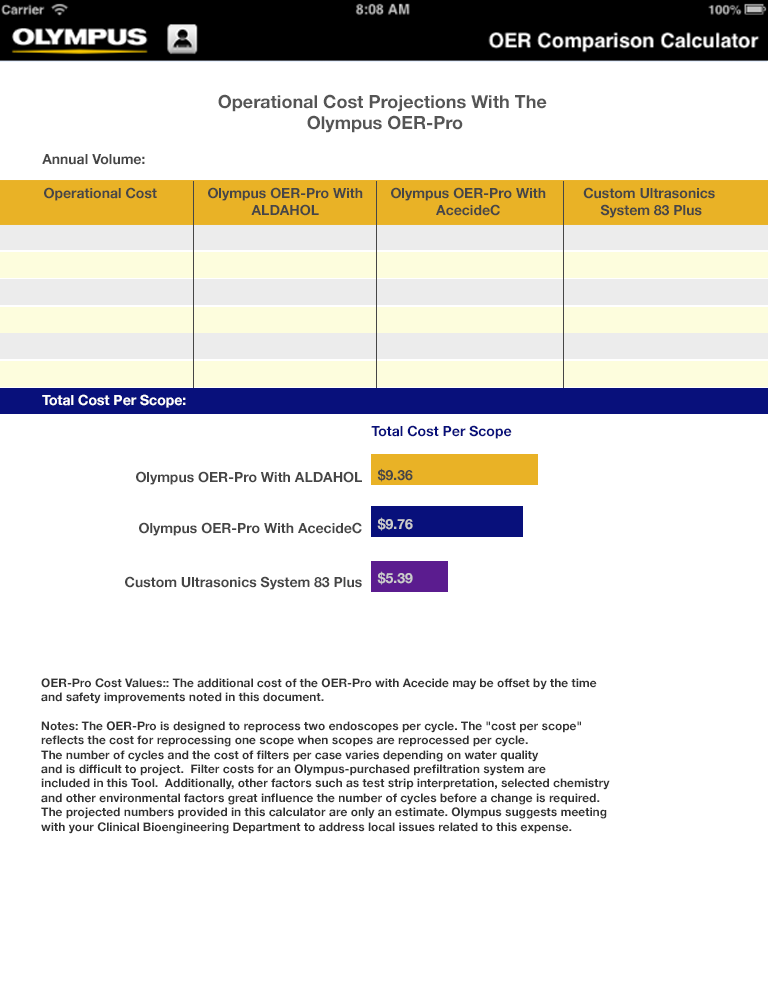
<style>
.page{position:relative;width:768px;height:1004px;background:#ffffff}
.page>*{position:absolute;margin:0}
.t1{font:18px "HelveticaNeue-Bold";color:#555555}
.t2{font:14px "HelveticaNeue-Bold";color:#464646}
.t3{font:14px "HelveticaNeue-Bold";color:#ffffff}
.t4{font:14px "HelveticaNeue-Bold";color:#08107b}
.t5{font:14px "HelveticaNeue-Bold";color:#cccccc}
.t6{font:12px "HelveticaNeue-Bold";color:#333333}
</style>
<div class="page">
<p class="t1" style="left:218px;top:94px;width:329px;height:39px;text-align:center">Operational Cost Projections With The <br>Olympus OER-Pro</p>
<p class="t2" style="left:42px;top:154px;width:103px;height:11px">Annual Volume:</p>
<p class="t2" style="left:44px;top:187px;width:113px;height:14px">Operational Cost</p>
<p class="t2" style="left:208px;top:187px;width:155px;height:29px;text-align:center">Olympus OER-Pro With<br>ALDAHOL</p>
<p class="t2" style="left:391px;top:187px;width:155px;height:29px;text-align:center">Olympus OER-Pro With<br>AcecideC</p>
<p class="t2" style="left:583px;top:187px;width:132px;height:31px;text-align:center">Custom Ultrasonics <br>System 83 Plus</p>
<p class="t3" style="left:42px;top:394px;width:144px;height:14px">Total Cost Per Scope:</p>
<p class="t4" style="left:371px;top:425px;width:141px;height:14px">Total Cost Per Scope</p>
<p class="t2" style="left:136px;top:471px;width:226px;height:14px">Olympus OER-Pro With ALDAHOL</p>
<p class="t2" style="left:377px;top:468px;width:36px;height:14px">$9.36</p>
<p class="t5" style="left:377px;top:517px;width:36px;height:14px">$9.76</p>
<p class="t2" style="left:139px;top:522px;width:223px;height:14px">Olympus OER-Pro With AcecideC</p>
<p class="t2" style="left:125px;top:576px;width:237px;height:14px">Custom Ultrasonics System 83 Plus</p>
<p class="t5" style="left:377px;top:571px;width:36px;height:14px">$5.39</p>
<p class="t6" style="left:41px;top:678px;width:569px;height:156px">OER-Pro Cost Values:: The additional cost of the OER-Pro with Acecide may be offset by the time <br>and safety improvements noted in this document.<br><br>Notes: The OER-Pro is designed to reprocess two endoscopes per cycle. The "cost per scope" <br>reflects the cost for reprocessing one scope when scopes are reprocessed per cycle.  <br>The number of cycles and the cost of filters per case varies depending on water quality <br>and is difficult to project.  Filter costs for an Olympus-purchased prefiltration system are <br>included in this Tool.  Additionally, other factors such as test strip interpretation, selected chemistry <br>and other environmental factors great influence the number of cycles before a change is required. <br>The projected numbers provided in this calculator are only an estimate. Olympus suggests meeting <br>with your Clinical Bioengineering Department to address local issues related to this expense.</p>
</div>
